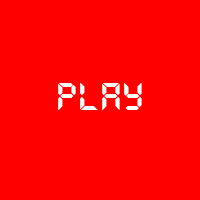
<style>
.page{position:relative;width:200px;height:200px;background:#ff0000}
.page>*{position:absolute;margin:0}
.t1{font:42.7px "DS-Digital-Bold";color:#ffffff}
</style>
<div class="page">
<p class="t1" style="left:58px;top:83px;width:84px;height:27px">PLAY</p>
</div>
